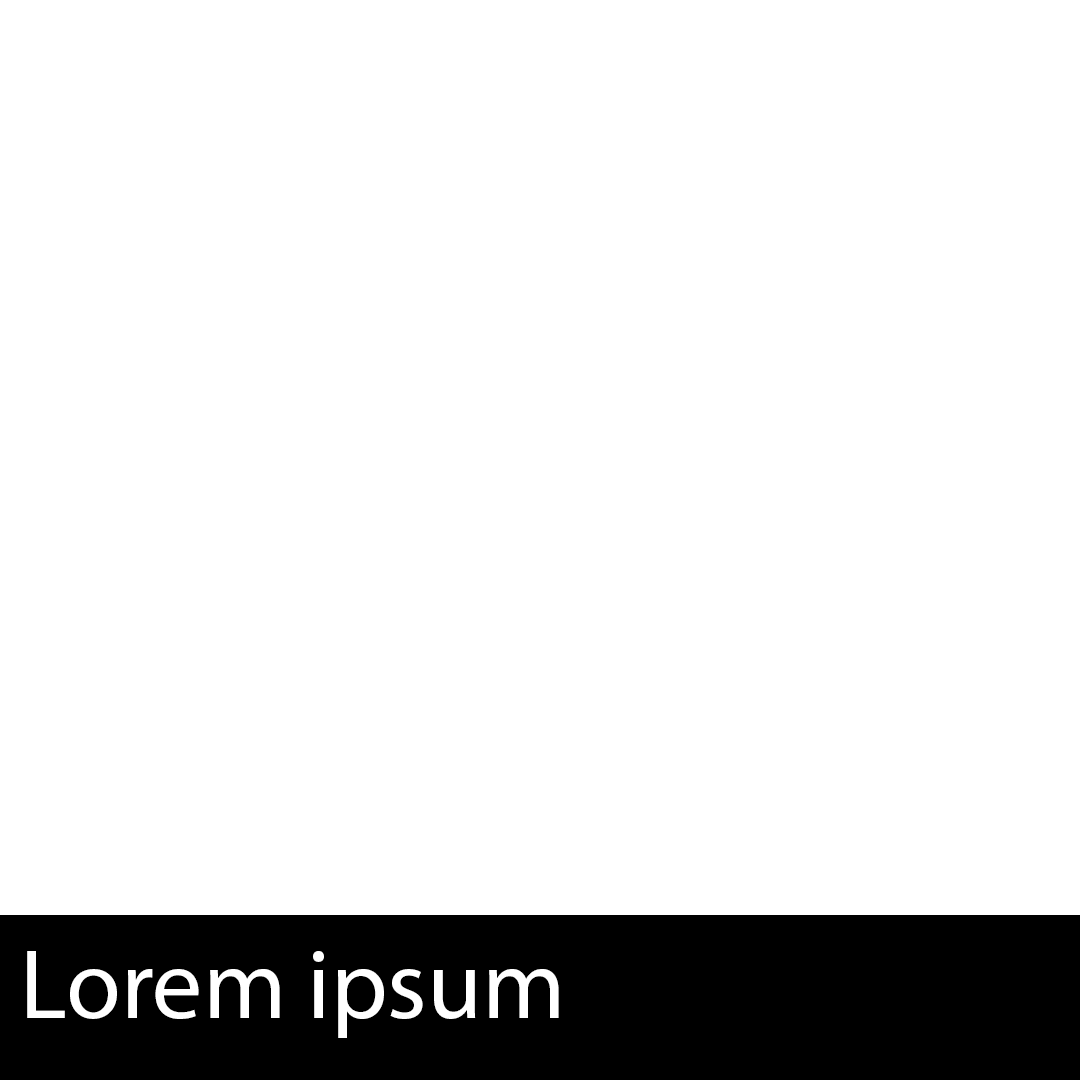
<style>
.page{position:relative;width:1080px;height:1080px;background:#ffffff}
.page>*{position:absolute;margin:0}
.t1{font:100px "MyriadPro-Regular";color:#ffffff}
</style>
<div class="page">
<p class="t1" style="left:27px;top:951px;width:532px;height:87px">Lorem ipsum</p>
</div>
